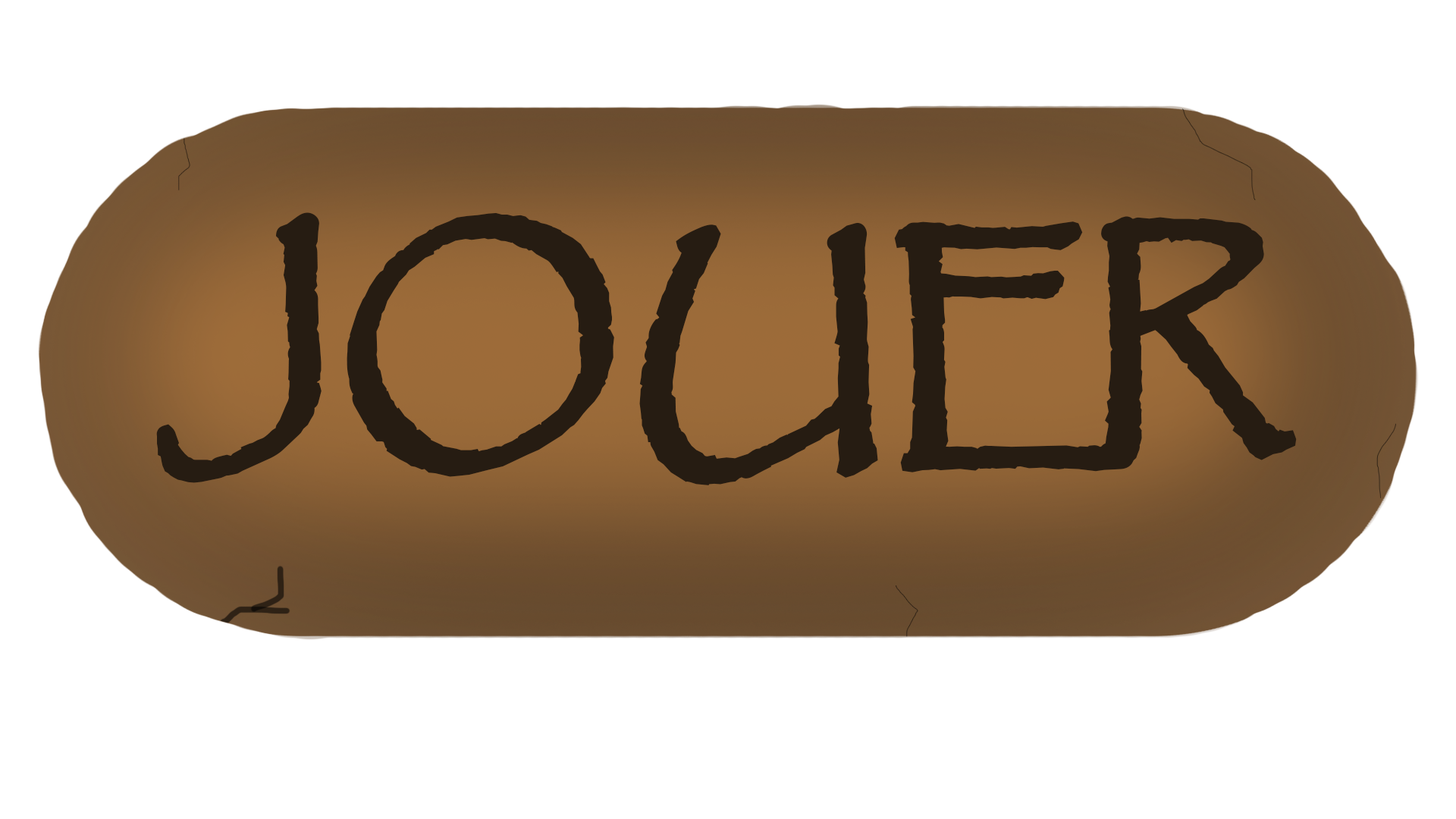
<style>
.page{position:relative;width:1456px;height:819px;background:#ffffff}
.page>*{position:absolute;margin:0}
.t1{font:220px "PapyrusStd";letter-spacing:0.01em;color:#261c12;font-weight:bold}
</style>
<div class="page">
<p class="t1" style="left:156px;top:212px;width:1141px;height:273px">JOUER</p>
</div>
